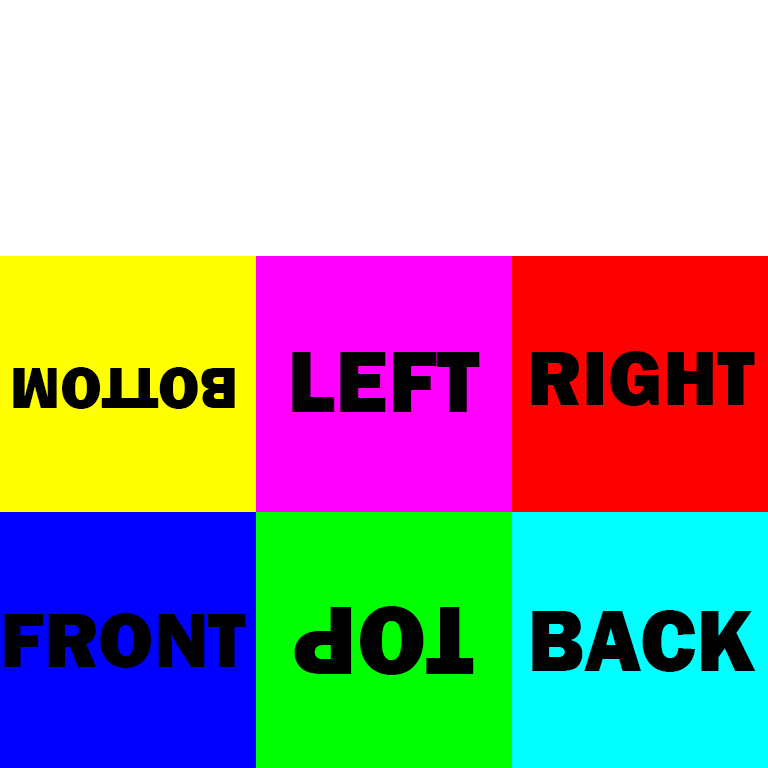
<style>
.page{position:relative;width:768px;height:768px;background:#ffffff}
.page>*{position:absolute;margin:0}
.t1{font:90px "FranklinGothic-Heavy";color:#000000}
.t2{font:80px "FranklinGothic-Heavy";color:#000000}
.t3{font:60px "FranklinGothic-Heavy";color:#000000}
.t4{font:100px "FranklinGothic-Heavy";color:#000000}
</style>
<div class="page">
<p class="t1" style="left:292px;top:352px;width:188px;height:60px">LEFT</p>
<p class="t2" style="left:531px;top:351px;width:224px;height:55px">RIGHT</p>
<p class="t3" style="left:13px;top:367px;width:222px;height:42px;rotate:180deg">BOTTOM</p>
<p class="t4" style="left:294px;top:606px;width:180px;height:69px;rotate:180deg">TOP</p>
<p class="t2" style="left:4px;top:613px;width:242px;height:55px">FRONT</p>
<p class="t1" style="left:532px;top:610px;width:224px;height:62px">BACK</p>
</div>
